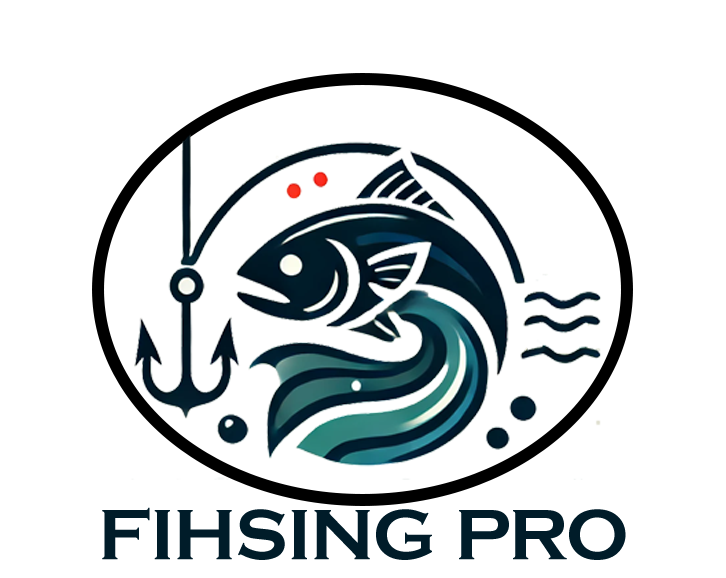
<style>
.page{position:relative;width:726px;height:578px;background:#ffffff}
.page>*{position:absolute;margin:0}
.t1{font:73.8px "CopperplateGothic-Bold";color:#001c29}
</style>
<div class="page">
<p class="t1" style="left:102px;top:507px;width:524px;height:53px">FIHSING PRO</p>
</div>
